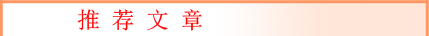
<style>
.page{position:relative;width:429px;height:36px;background:#ffffff}
.page>*{position:absolute;margin:0}
.t1{font:23px "SimSun";color:#ff0000}
</style>
<div class="page">
<p class="t1" style="left:77px;top:9px;width:125px;height:22px">推 荐 文 章</p>
</div>
